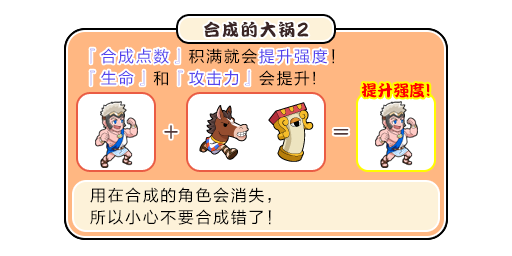
<style>
.page{position:relative;width:512px;height:256px;background:#ffffff}
.page>*{position:absolute;margin:0}
.t1{font:17px "DFPKanTingLiuW9";letter-spacing:0.1em;color:#3b2626}
.t2{font:20.4px "DFPKanTingLiuW9";letter-spacing:0.1em;color:#3b2626;scale:0.83 1}
.t3{font:16px/22px "FZLTHJW--GB1-0";letter-spacing:0.1em;color:#5444ed}
.t4{font:16px/22px "FZLTHJW--GB1-0";letter-spacing:0.1em;color:#000000}
.t5{font:16px "FZLTHJW--GB1-0";letter-spacing:0.1em;color:#5444ed}
.t6{font:16px "DFPKanTingLiuW9";color:#ff0000}
.t7{font:18px "DFPKanTingLiuW9";color:#ff0000}
</style>
<div class="page">
<p class="t1" style="left:204px;top:21px;width:105px;height:17px">合成的大锅<span class="t2">2</span></p>
<p class="t3" style="left:90px;top:48px;width:245px;height:38px">『合成点数』<span class="t4">积满就会</span>提升强度<span class="t4">！<br></span>『生命』<span class="t4">和</span>『攻击力』<span class="t4">会提升!</span></p>
<p class="t3" style="left:90px;top:48px;width:160px;height:38px">『合成点数』<br>『生命』　『攻击力』</p>
<p class="t5" style="left:259px;top:48px;width:68px;height:16px">提升强度</p>
<p class="t6" style="left:361px;top:83px;width:69px;height:15px">提升强度<span class="t7">!</span></p>
<p class="t4" style="left:90px;top:187px;width:181px;height:38px">用在合成的角色会消失，<br>所以小心不要合成错了！</p>
</div>
